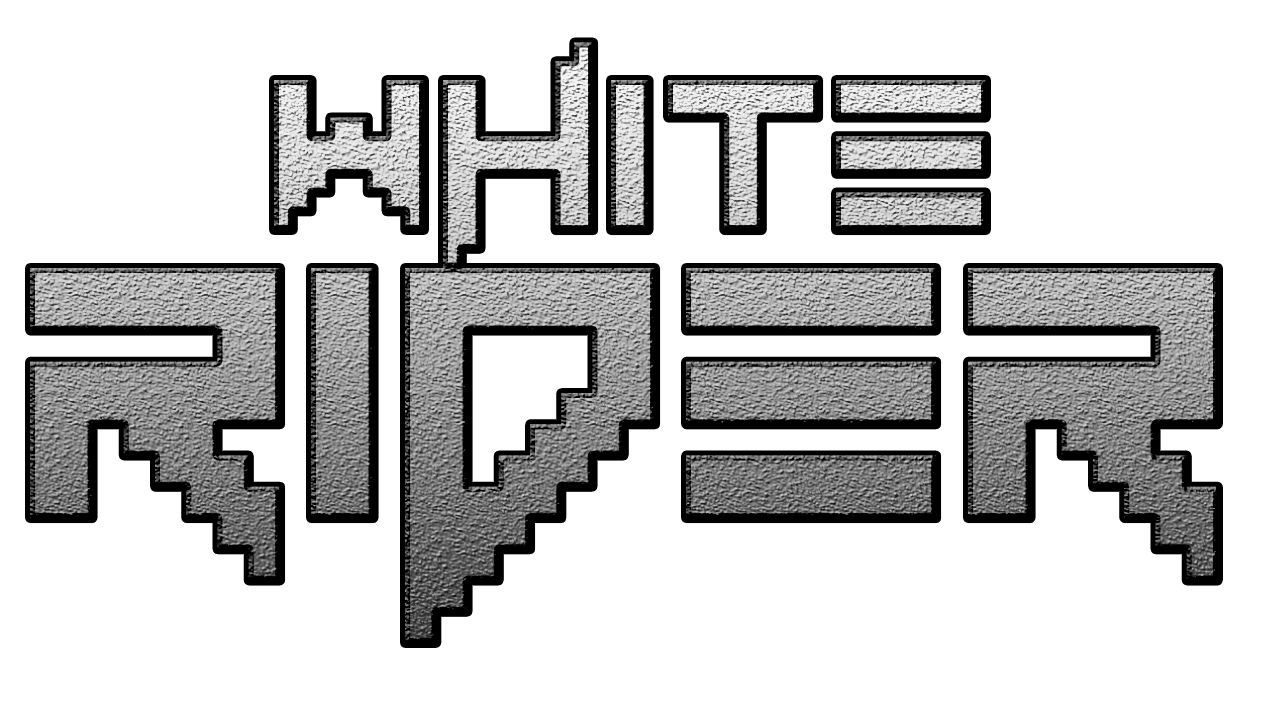
<style>
.page{position:relative;width:1280px;height:720px;background:#ffffff}
.page>*{position:absolute;margin:0}
.t1{font:300px/0px "Vermin-Vibes-1989"}
.t2{font:500px/0px "Vermin-Vibes-1989"}
</style>
<div class="page">
<p class="t1" style="left:30px;top:42px;width:1188px;height:601px;text-align:center">White<br><span class="t2">Rider</span></p>
</div>
